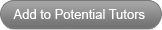
<style>
.page{position:relative;width:162px;height:30px}
.page>*{position:absolute;margin:0}
.t1{font:13px "ArialMT";color:#ffffff}
</style>
<div class="page">
<p class="t1" style="left:13px;top:9px;width:132px;height:10px">Add to Potential Tutors</p>
</div>
